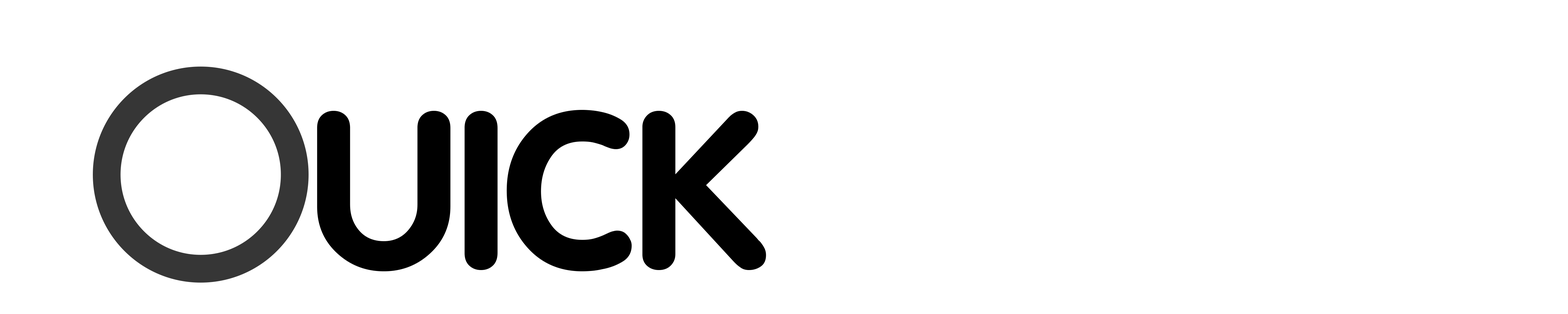
<style>
.page{position:relative;width:1568px;height:314px;background:#ffffff}
.page>*{position:absolute;margin:0}
.t1{font:219.5px "VAGRounded-Bold";letter-spacing:-0.02em;color:#000000}
</style>
<div class="page">
<p class="t1" style="left:317px;top:110px;width:449px;height:161px">UICK</p>
</div>
